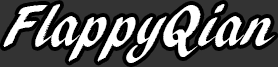
<style>
.page{position:relative;width:278px;height:67px;background:#333333}
.page>*{position:absolute;margin:0}
.t1{font:60px "ARBLANCA";color:#ffffff}
</style>
<div class="page">
<p class="t1" style="left:3px;top:4px;width:272px;height:59px">FlappyQian</p>
</div>
